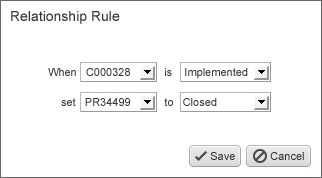
<style>
.page{position:relative;width:322px;height:178px;background:#ffffff}
.page>*{position:absolute;margin:0}
.t1{font:14px "ArialMT";color:#333333}
.t2{font:11px "ArialMT";color:#333333}
.t3{font:11px "ArialMT";color:#303030}
</style>
<div class="page">
<p class="t1" style="left:11px;top:11px;width:109px;height:13px">Relationship Rule</p>
<p class="t2" style="left:48px;top:68px;width:200px;height:11px">When   C000328           is    Implemented</p>
<p class="t2" style="left:61px;top:98px;width:156px;height:8px">set   PR34499           to   Closed</p>
<p class="t3" style="left:210px;top:152px;width:25px;height:8px">Save</p>
<p class="t3" style="left:270px;top:152px;width:34px;height:8px">Cancel</p>
</div>
